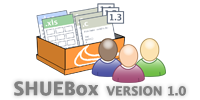
<style>
.page{position:relative;width:200px;height:100px;background:#ffffff}
.page>*{position:absolute;margin:0}
.t1{font:18px "LucidaGrande-Bold";color:#808080;font-weight:bold}
.t2{font:12px "LucidaGrande-Bold";color:#808080;font-weight:bold}
</style>
<div class="page">
<p class="t1" style="left:14px;top:81px;width:85px;height:15px">SHUEBox</p>
<p class="t2" style="left:106px;top:86px;width:80px;height:10px">VERSION 1.0</p>
</div>
